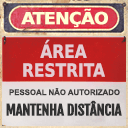
<style>
.page{position:relative;width:128px;height:128px}
.page>*{position:absolute;margin:0}
.t1{font:16.5px "PrimaSansBT-Bold";letter-spacing:-0.06em;color:#ffffd5;text-transform:uppercase;font-weight:bold;scale:1.04 1}
.t2{font:18.2px/18.9px "PrimaSansBT-Bold";color:#e3cbd1;text-transform:uppercase;scale:0.85 1}
.t3{font:7.8px "Arial-BoldMT";color:#3f3d3d;text-transform:uppercase}
.t4{font:14px "FjallaOne-Regular";letter-spacing:-0.04em;color:#313131;text-transform:uppercase;font-weight:bold;scale:1.05 1}
</style>
<div class="page">
<p class="t1" style="left:21px;top:8px;width:87px;height:20px">atenção</p>
<p class="t2" style="left:23px;top:39px;width:82px;height:38px;text-align:center">área<br>restrita</p>
<p class="t3" style="left:9px;top:88px;width:111px;height:8px">pessoal não autorizado</p>
<p class="t4" style="left:6px;top:100px;width:116px;height:16px">MANTENHA DISTÂNCIA</p>
</div>
